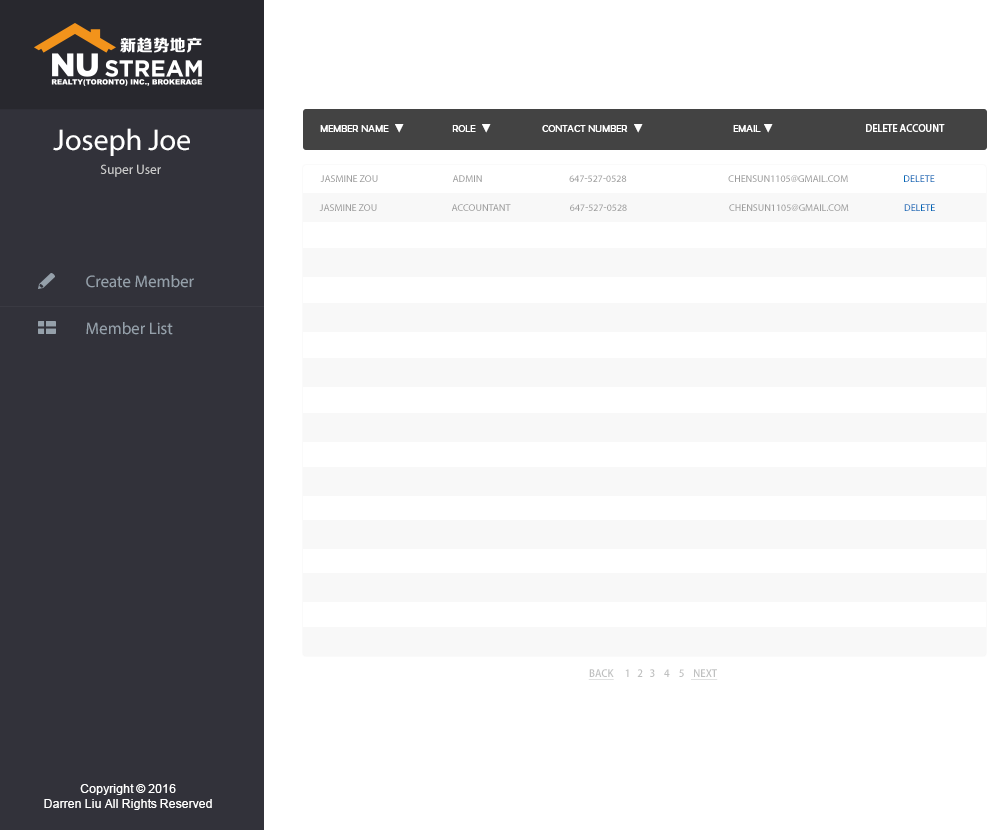
<style>
.page{position:relative;width:1000px;height:830px;background:#ffffff}
.page>*{position:absolute;margin:0}
.t1{font:10px "AdobeHeitiStd-Regular";color:#ffffff;text-transform:uppercase}
.t2{font:10px "BerlinSansFB-Reg";color:#ffffff;text-transform:uppercase}
.t3{font:30px "MyriadPro-Regular";color:#ffffff}
.t4{font:13.4px "MyriadPro-Regular";color:#cccccc}
.t5{font:10px "MyriadPro-Regular";color:#9c9c9c;text-transform:uppercase}
.t6{font:10px "MyriadPro-Regular";color:#0068b7;text-transform:uppercase}
.t7{font:16.8px "MyriadPro-Regular";color:#95a0aa}
.t8{font:10px "AdobeHeitiStd-Regular";color:#bfc0c0;text-transform:uppercase}
.t9{font:10px "AdobeHeitiStd-Regular";color:#bfc0c0;text-transform:uppercase;text-decoration:underline}
.t10{font:12px "ArialMT";color:#ffffff}
</style>
<div class="page">
<p class="t1" style="left:320px;top:124px;width:625px;height:9px"><span class="t2">  Member Name  </span>▼<span class="t2">                role  </span>▼<span class="t2">                 CONTACT NUMBER  </span>▼<span class="t2">                              EMAIL </span>▼                                              delete account</p>
<p class="t3" style="left:53px;top:128px;width:137px;height:28px">Joseph Joe</p>
<p class="t4" style="left:100px;top:164px;width:61px;height:13px">Super User</p>
<p class="t5" style="left:320px;top:175px;width:615px;height:7px">Jasmine Zou                                   admin                                         647-527-0528                                                CHENSUN1105@GMAIL.COM                          <span class="t6">delete</span></p>
<p class="t5" style="left:319px;top:204px;width:616px;height:7px">Jasmine Zou                                   aCCOUNTANT                            647-527-0528                                                CHENSUN1105@GMAIL.COM                          <span class="t6">delete</span></p>
<p class="t7" style="left:86px;top:275px;width:108px;height:13px">Create Member</p>
<p class="t7" style="left:86px;top:322px;width:87px;height:13px">Member List</p>
<p class="t8" style="left:588px;top:669px;width:130px;height:11px"><span class="t9">back</span>     1   2   3    4    5   <span class="t9"> next</span></p>
<p class="t10" style="left:44px;top:784px;width:168px;height:26px;text-align:center">Copyright © 2016<br>Darren Liu All Rights Reserved</p>
</div>
